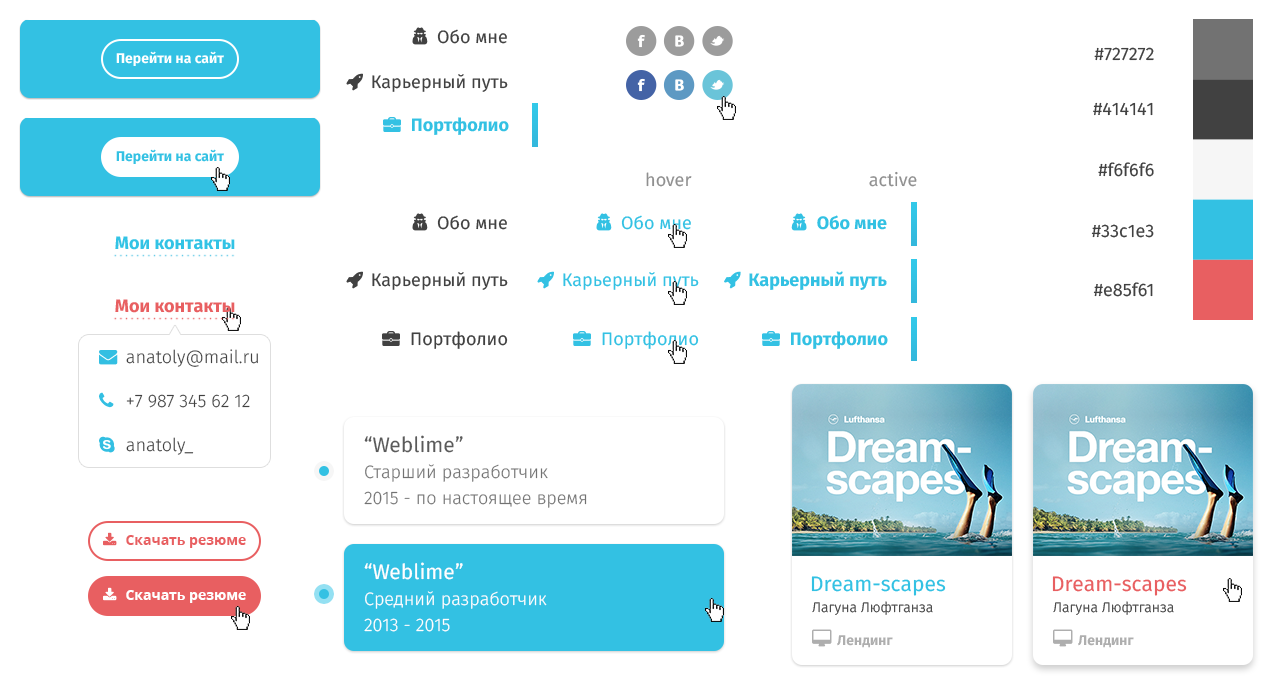
<style>
.page{position:relative;width:1275px;height:685px;background:#ffffff}
.page>*{position:absolute;margin:0}
.t1{font:14px "FiraSans-Bold";color:#ffffff}
.t2{font:18px "FiraSans-Regular";color:#414141}
.t3{font:18px "FiraSans-Bold";color:#33c1e3}
.t4{font:14px "FiraSans-Bold";color:#33c1e3}
.t5{font:18px "FiraSans-Regular";color:#909090}
.t6{font:18px "FiraSans-Bold";color:#32c3e5}
.t7{font:18px "FiraSans-Bold";color:#e85f61}
.t8{font:18px "FiraSans-Regular";color:#33c1e3}
.t9{font:18px "FiraSans-Light";color:#414141}
.t10{font:18px/26px "FiraSans-Light";color:#727272}
.t11{font:21px/26px "FiraSans-Regular";color:#5a5a5a}
.t12{font:14px "OpenSans-Bold";color:#e85f61}
.t13{font:18px/26px "FiraSans-Light";color:#ffffff}
.t14{font:21px/26px "FiraSans-Regular";color:#ffffff}
.t15{font:21px "FiraSans-Regular";color:#33c1e3}
.t16{font:21px "FiraSans-Regular";color:#e85f61}
.t17{font:14px "OpenSans-Bold";color:#ffffff}
.t18{font:14px "FiraSans-Light";color:#414141}
</style>
<div class="page">
<p class="t1" style="left:116px;top:51px;width:108px;height:15px">Перейти на сайт</p>
<p class="t2" style="left:1094px;top:47px;width:60px;height:14px">#727272</p>
<p class="t2" style="left:1093px;top:102px;width:60px;height:14px">#414141</p>
<p class="t3" style="left:412px;top:117px;width:97px;height:18px">Портфолио</p>
<p class="t4" style="left:116px;top:149px;width:108px;height:15px">Перейти на сайт</p>
<p class="t5" style="left:646px;top:172px;width:46px;height:15px">hover</p>
<p class="t5" style="left:869px;top:171px;width:48px;height:16px">active</p>
<p class="t2" style="left:1098px;top:162px;width:56px;height:15px">#f6f6f6</p>
<p class="t2" style="left:1091px;top:224px;width:63px;height:14px">#33c1e3</p>
<p class="t6" style="left:115px;top:236px;width:120px;height:14px">Мои контакты</p>
<p class="t2" style="left:1093px;top:282px;width:60px;height:15px">#e85f61</p>
<p class="t7" style="left:115px;top:299px;width:120px;height:14px">Мои контакты</p>
<p class="t2" style="left:411px;top:331px;width:97px;height:18px">Портфолио</p>
<p class="t8" style="left:602px;top:331px;width:97px;height:18px">Портфолио</p>
<p class="t3" style="left:791px;top:331px;width:97px;height:18px">Портфолио</p>
<p class="t9" style="left:126px;top:349px;width:132px;height:18px">anatoly@mail.ru</p>
<p class="t9" style="left:126px;top:394px;width:124px;height:14px">+7 987 345 62 12</p>
<p class="t9" style="left:126px;top:437px;width:68px;height:18px">anatoly_</p>
<p class="t10" style="left:364px;top:435px;width:223px;height:73px"><span class="t11">“Weblime”<br></span>Старший разработчик<br>2015 - по настоящее время</p>
<p class="t12" style="left:126px;top:535px;width:120px;height:13px">Скачать резюме</p>
<p class="t13" style="left:364px;top:562px;width:183px;height:70px"><span class="t14">“Weblime”<br></span>Средний разработчик<br>2013 - 2015</p>
<p class="t15" style="left:811px;top:576px;width:135px;height:20px">Dream-scapes</p>
<p class="t16" style="left:1052px;top:576px;width:135px;height:20px">Dream-scapes</p>
<p class="t17" style="left:126px;top:590px;width:120px;height:13px">Скачать резюме</p>
<p class="t18" style="left:812px;top:601px;width:121px;height:14px">Лагуна Люфтганза</p>
<p class="t18" style="left:1053px;top:601px;width:121px;height:14px">Лагуна Люфтганза</p>
</div>
